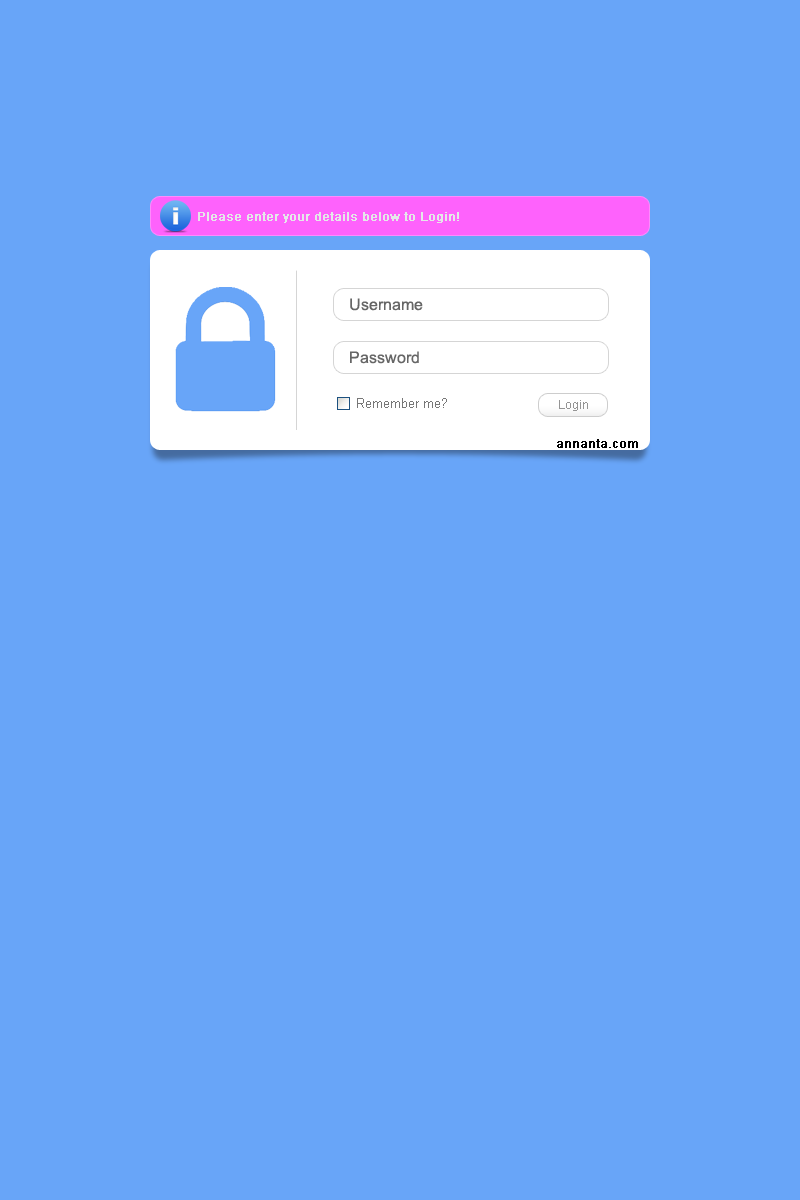
<style>
.page{position:relative;width:800px;height:1200px;background:#68a5f8}
.page>*{position:absolute;margin:0}
.t1{font:12px "ArialMT";color:#e5e7e9;font-weight:bold}
.t2{font:16px "ArialMT";color:#666666}
.t3{font:12px "ArialMT";color:#959494}
.t4{font:12px "ArialMT";color:#020202;font-weight:bold}
</style>
<div class="page">
<p class="t1" style="left:198px;top:212px;width:261px;height:11px">Please enter your details below to Login!</p>
<p class="t2" style="left:350px;top:298px;width:73px;height:13px">Username</p>
<p class="t2" style="left:350px;top:351px;width:69px;height:13px">Password</p>
<p class="t3" style="left:559px;top:400px;width:29px;height:11px">Login</p>
<p class="t4" style="left:557px;top:439px;width:81px;height:9px">annanta.com</p>
</div>
